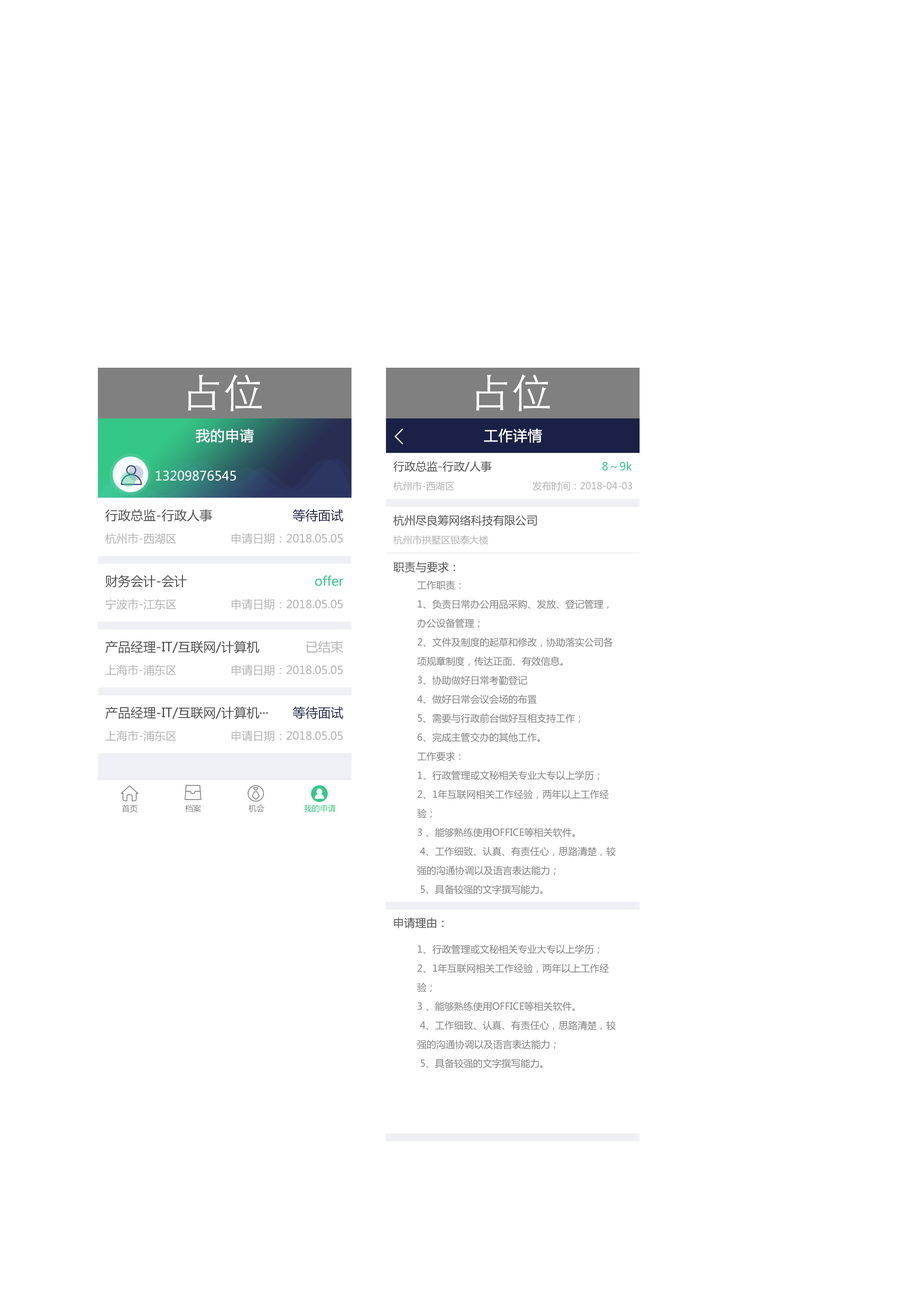
<style>
.page{position:relative;width:913px;height:1306px;background:#ffffff}
.page>*{position:absolute;margin:0}
.t1{font:39.6px "STHeitiSC-Light";color:#ffffff}
.t2{font:14.3px "MicrosoftYaHei";color:#ffffff;font-weight:bold}
.t3{font:11.1px "MicrosoftYaHei";color:#4d4d4d}
.t4{font:11.1px "MicrosoftYaHei";color:#35c787}
.t5{font:12.7px "MicrosoftYaHei";color:#ffffff}
.t6{font:9.5px "MicrosoftYaHei";color:#b3b3b3}
.t7{font:12.7px "MicrosoftYaHei";color:#4d4d4d}
.t8{font:12.7px "MicrosoftYaHei";color:#1b2146}
.t9{font:11.1px "MicrosoftYaHei";color:#b3b3b3}
.t10{font:12.7px "MicrosoftYaHei";color:#35c787}
.t11{font:9.5px/19px "MicrosoftYaHei";color:#808080}
.t12{font:12.7px "MicrosoftYaHei";color:#b3b3b3}
.t13{font:7.9px "MicrosoftYaHei";color:#808080}
.t14{font:7.9px "MicrosoftYaHei";color:#35c787}
</style>
<div class="page">
<p class="t1" style="left:188px;top:374px;width:74px;height:37px">占位</p>
<p class="t1" style="left:476px;top:374px;width:74px;height:37px">占位</p>
<p class="t2" style="left:196px;top:428px;width:58px;height:15px">我的申请</p>
<p class="t2" style="left:484px;top:428px;width:58px;height:15px">工作详情</p>
<p class="t3" style="left:393px;top:461px;width:99px;height:11px">行政总监-行政/人事</p>
<p class="t4" style="left:602px;top:461px;width:30px;height:10px">8～9k</p>
<p class="t5" style="left:156px;top:470px;width:80px;height:11px">13209876545</p>
<p class="t6" style="left:393px;top:481px;width:61px;height:10px">杭州市-西湖区</p>
<p class="t6" style="left:532px;top:481px;width:100px;height:10px">发布时间：2018-04-03</p>
<p class="t7" style="left:105px;top:509px;width:107px;height:13px">行政总监-行政人事</p>
<p class="t8" style="left:292px;top:509px;width:51px;height:13px">等待面试</p>
<p class="t3" style="left:393px;top:515px;width:144px;height:11px">杭州尽良筹网络科技有限公司</p>
<p class="t9" style="left:105px;top:533px;width:71px;height:11px">杭州市-西湖区</p>
<p class="t9" style="left:231px;top:533px;width:112px;height:11px">申请日期：2018.05.05</p>
<p class="t6" style="left:393px;top:535px;width:95px;height:10px">杭州市拱墅区银泰大楼</p>
<p class="t3" style="left:393px;top:562px;width:62px;height:11px">职责与要求：</p>
<p class="t7" style="left:105px;top:575px;width:82px;height:13px">财务会计-会计</p>
<p class="t10" style="left:315px;top:575px;width:29px;height:11px">offer</p>
<p class="t11" style="left:417px;top:581px;width:199px;height:313px">工作职责： <br>1、负责日常办公用品采购、发放、登记管理，办公设备管理； <br>2、文件及制度的起草和修改，协助落实公司各项规章制度，传达正面、有效信息。<br>3、协助做好日常考勤登记 <br>4、做好日常会议会场的布置<br>5、需要与行政前台做好互相支持工作；<br>6、完成主管交办的其他工作。 <br>工作要求： <br>1、行政管理或文秘相关专业大专以上学历；<br>2、1年互联网相关工作经验，两年以上工作经验；<br>3 、能够熟练使用OFFICE等相关软件。<br> 4、工作细致、认真、有责任心，思路清楚，较强的沟通协调以及语言表达能力；<br> 5、具备较强的文字撰写能力。</p>
<p class="t9" style="left:105px;top:599px;width:71px;height:11px">宁波市-江东区</p>
<p class="t9" style="left:231px;top:599px;width:112px;height:11px">申请日期：2018.05.05</p>
<p class="t7" style="left:105px;top:641px;width:155px;height:12px">产品经理-IT/互联网/计算机</p>
<p class="t12" style="left:306px;top:641px;width:37px;height:12px">已结束</p>
<p class="t9" style="left:105px;top:665px;width:71px;height:11px">上海市-浦东区</p>
<p class="t9" style="left:231px;top:665px;width:112px;height:11px">申请日期：2018.05.05</p>
<p class="t7" style="left:105px;top:707px;width:163px;height:12px">产品经理-IT/互联网/计算机···</p>
<p class="t8" style="left:292px;top:707px;width:51px;height:12px">等待面试</p>
<p class="t9" style="left:105px;top:730px;width:71px;height:11px">上海市-浦东区</p>
<p class="t9" style="left:231px;top:730px;width:112px;height:11px">申请日期：2018.05.05</p>
<p class="t13" style="left:122px;top:804px;width:16px;height:9px">首页</p>
<p class="t13" style="left:185px;top:804px;width:16px;height:9px">档案</p>
<p class="t13" style="left:248px;top:804px;width:16px;height:8px">机会</p>
<p class="t14" style="left:304px;top:804px;width:32px;height:8px">我的申请</p>
<p class="t3" style="left:394px;top:917px;width:50px;height:11px">申请理由：</p>
<p class="t11" style="left:417px;top:945px;width:199px;height:123px">1、行政管理或文秘相关专业大专以上学历；<br>2、1年互联网相关工作经验，两年以上工作经验；<br>3 、能够熟练使用OFFICE等相关软件。<br> 4、工作细致、认真、有责任心，思路清楚，较强的沟通协调以及语言表达能力；<br> 5、具备较强的文字撰写能力。</p>
</div>
